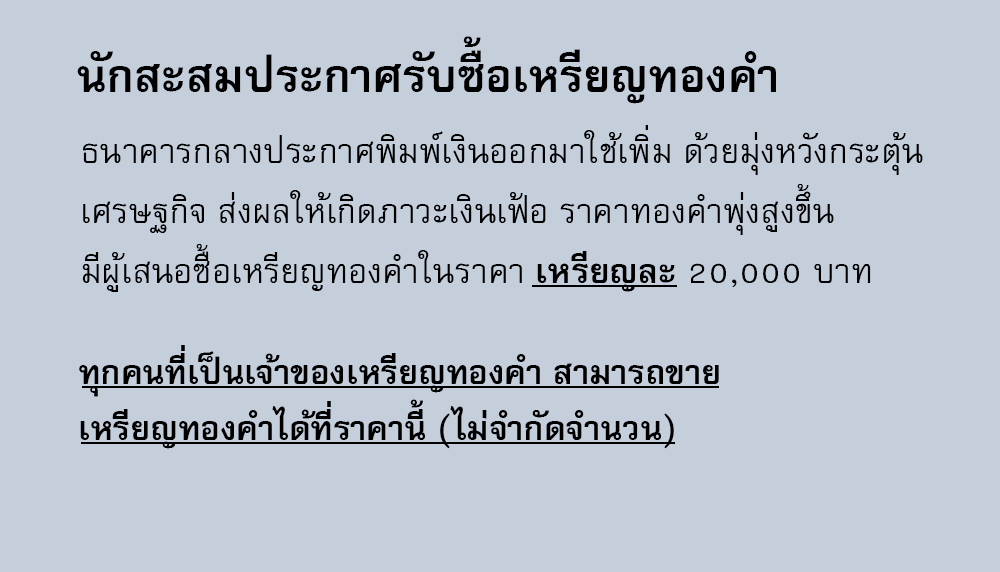
<style>
.page{position:relative;width:1000px;height:572px;background:#c5cedb}
.page>*{position:absolute;margin:0}
.t1{font:64px "FreesiaUPCBold";color:#000000}
.t2{font:48px/60px "FreesiaUPC";color:#000000}
.t3{font:48px/60px "FreesiaUPCBold";color:#000000}
.t4{font:47px "FreesiaUPCBold";color:#000000}
</style>
<div class="page">
<p class="t1" style="left:77px;top:36px;width:699px;height:68px">นักสะสมประกาศรับซื้อเหรียญทองคำ</p>
<p class="t2" style="left:82px;top:125px;width:841px;height:167px">ธนาคารกลางประกาศพิมพ์เงินออกมาใช้เพิ่ม ด้วยมุ่งหวังกระตุ้น<br>เศรษฐกิจ ส่งผลให้เกิดภาวะเงินเฟ้อ ราคาทองคำพุ่งสูงขึ้น<br>มีผู้เสนอซื้อเหรียญทองคำในราคา <span class="t3">เหรียญละ </span>20,000 บาท</p>
<p class="t4" style="left:79px;top:345px;width:640px;height:104px">ทุกคนที่เป็นเจ้าของเหรียญทองคำ สามารถขาย<br>เหรียญทองคำได้ที่ราคานี้ (ไม่จำกัดจำนวน)</p>
</div>
